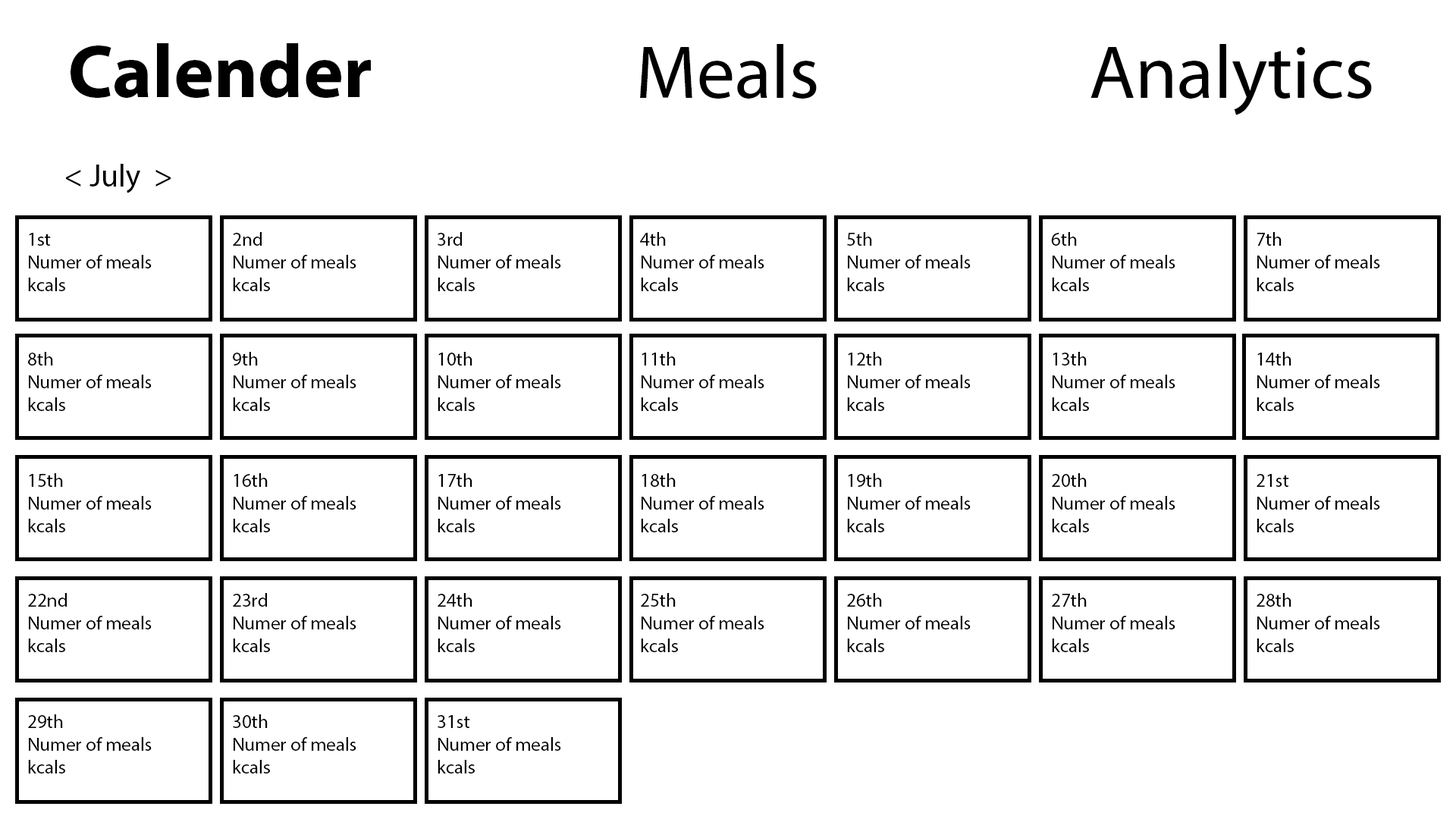
<style>
.page{position:relative;width:1456px;height:819px;background:#ffffff}
.page>*{position:absolute;margin:0}
.t1{font:75.8px "MyriadPro-Bold";color:#000000}
.t2{font:75.8px "MyriadPro-Regular";color:#000000}
.t3{font:31.6px "MyriadPro-Regular";color:#000000}
.t4{font:19px "MyriadPro-Regular";color:#000000}
</style>
<div class="page">
<p class="t1" style="left:71px;top:43px;width:300px;height:55px">Calender</p>
<p class="t2" style="left:640px;top:44px;width:177px;height:55px">Meals</p>
<p class="t2" style="left:1090px;top:44px;width:282px;height:71px">Analytics</p>
<p class="t3" style="left:66px;top:164px;width:105px;height:29px">&lt; July  &gt;</p>
<p class="t4" style="left:28px;top:233px;width:124px;height:58px">1st<br>Numer of meals<br>kcals</p>
<p class="t4" style="left:233px;top:232px;width:123px;height:59px">2nd<br>Numer of meals<br>kcals</p>
<p class="t4" style="left:438px;top:232px;width:123px;height:59px">3rd<br>Numer of meals<br>kcals</p>
<p class="t4" style="left:640px;top:232px;width:124px;height:59px">4th<br>Numer of meals<br>kcals</p>
<p class="t4" style="left:847px;top:232px;width:124px;height:59px">5th<br>Numer of meals<br>kcals</p>
<p class="t4" style="left:1051px;top:232px;width:124px;height:59px">6th<br>Numer of meals<br>kcals</p>
<p class="t4" style="left:1257px;top:232px;width:123px;height:59px">7th<br>Numer of meals<br>kcals</p>
<p class="t4" style="left:28px;top:352px;width:124px;height:59px">8th<br>Numer of meals<br>kcals</p>
<p class="t4" style="left:233px;top:352px;width:123px;height:59px">9th<br>Numer of meals<br>kcals</p>
<p class="t4" style="left:438px;top:352px;width:123px;height:59px">10th<br>Numer of meals<br>kcals</p>
<p class="t4" style="left:641px;top:352px;width:123px;height:59px">11th<br>Numer of meals<br>kcals</p>
<p class="t4" style="left:847px;top:352px;width:124px;height:59px">12th<br>Numer of meals<br>kcals</p>
<p class="t4" style="left:1052px;top:352px;width:123px;height:59px">13th<br>Numer of meals<br>kcals</p>
<p class="t4" style="left:1257px;top:352px;width:123px;height:59px">14th<br>Numer of meals<br>kcals</p>
<p class="t4" style="left:28px;top:473px;width:124px;height:59px">15th<br>Numer of meals<br>kcals</p>
<p class="t4" style="left:233px;top:473px;width:123px;height:59px">16th<br>Numer of meals<br>kcals</p>
<p class="t4" style="left:438px;top:473px;width:123px;height:59px">17th<br>Numer of meals<br>kcals</p>
<p class="t4" style="left:641px;top:473px;width:123px;height:59px">18th<br>Numer of meals<br>kcals</p>
<p class="t4" style="left:847px;top:473px;width:124px;height:59px">19th<br>Numer of meals<br>kcals</p>
<p class="t4" style="left:1052px;top:473px;width:123px;height:59px">20th<br>Numer of meals<br>kcals</p>
<p class="t4" style="left:1257px;top:474px;width:123px;height:58px">21st<br>Numer of meals<br>kcals</p>
<p class="t4" style="left:28px;top:593px;width:124px;height:59px">22nd<br>Numer of meals<br>kcals</p>
<p class="t4" style="left:233px;top:593px;width:123px;height:59px">23rd<br>Numer of meals<br>kcals</p>
<p class="t4" style="left:438px;top:593px;width:123px;height:59px">24th<br>Numer of meals<br>kcals</p>
<p class="t4" style="left:641px;top:593px;width:123px;height:59px">25th<br>Numer of meals<br>kcals</p>
<p class="t4" style="left:847px;top:593px;width:124px;height:59px">26th<br>Numer of meals<br>kcals</p>
<p class="t4" style="left:1052px;top:593px;width:123px;height:59px">27th<br>Numer of meals<br>kcals</p>
<p class="t4" style="left:1257px;top:593px;width:123px;height:59px">28th<br>Numer of meals<br>kcals</p>
<p class="t4" style="left:28px;top:714px;width:124px;height:59px">29th<br>Numer of meals<br>kcals</p>
<p class="t4" style="left:233px;top:714px;width:123px;height:59px">30th<br>Numer of meals<br>kcals</p>
<p class="t4" style="left:438px;top:715px;width:123px;height:58px">31st<br>Numer of meals<br>kcals</p>
</div>
